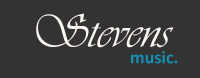
<style>
.page{position:relative;width:200px;height:78px;background:#333333}
.page>*{position:absolute;margin:0}
.t1{font:48px/9px "Vivaldii";color:#fcf5f5}
.t2{font:18px/9px "Calibri-Bold";color:#158daf}
</style>
<div class="page">
<p class="t1" style="left:36px;top:13px;width:142px;height:51px;text-align:center">Stevens<br>    <span class="t2">music.</span></p>
</div>
